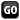
<style>
.page{position:relative;width:20px;height:20px;background:#ffffff}
.page>*{position:absolute;margin:0}
.t1{font:10px "KozGoPro-Heavy";color:#ffffff}
</style>
<div class="page">
<p class="t1" style="left:4px;top:6px;width:13px;height:8px">GO</p>
</div>
